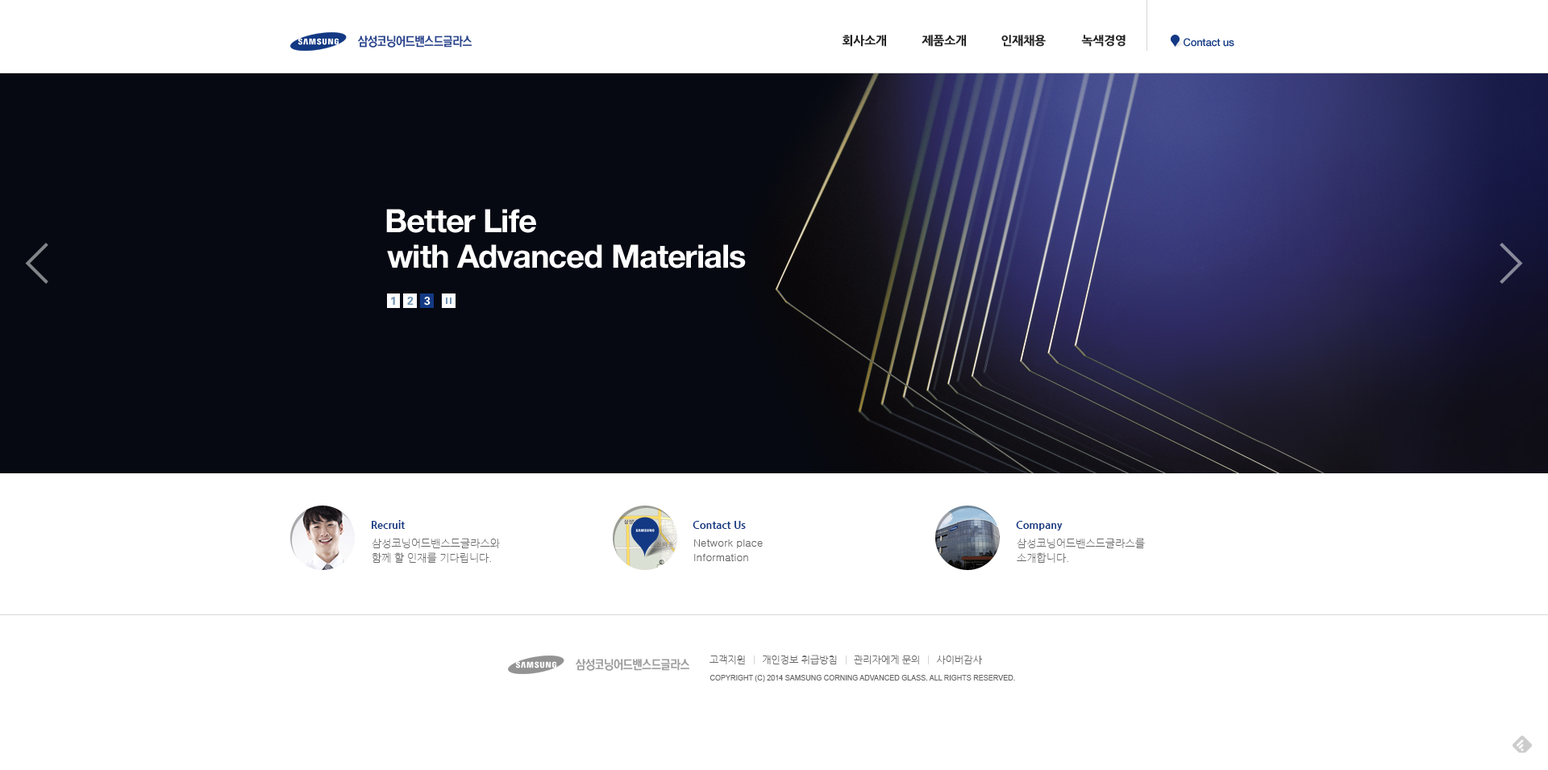
<style>
.page{position:relative;width:1548px;height:770px;background:#ffffff}
.page>*{position:absolute;margin:0}
.t1{font:10.5px "NanumGothicExtraBold";color:#133984}
.t2{font:10.5px/14.5px "NanumGothicLight";color:#666666}
.t3{font:10.5px/14.5px "Gulim";color:#666666}
.t4{font:9.7px "NanumGothicLight";color:#666666}
.t5{font:7.3px "ArialMT";color:#666666}
</style>
<div class="page">
<p class="t1" style="left:372px;top:520px;width:33px;height:9px">Recruit</p>
<p class="t1" style="left:693px;top:521px;width:53px;height:8px">Contact Us</p>
<p class="t1" style="left:1016px;top:521px;width:47px;height:10px">Company</p>
<p class="t2" style="left:372px;top:538px;width:128px;height:25px">삼성코닝어드밴스드글라스와<br>함께 할 인재를 기다립니다.</p>
<p class="t3" style="left:694px;top:539px;width:69px;height:22px">Network place<br>Information</p>
<p class="t2" style="left:1017px;top:538px;width:128px;height:25px">삼성코닝어드밴스드글라스를<br>소개합니다.</p>
<p class="t4" style="left:710px;top:655px;width:272px;height:9px">고객지원      개인정보 취급방침      관리자에게 문의      사이버감사</p>
<p class="t5" style="left:710px;top:675px;width:305px;height:7px">COPYRIGHT (C) 2014 SAMSUNG CORNING ADVANCED GLASS. ALL RIGHTS RESERVED.</p>
</div>
